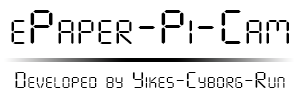
<style>
.page{position:relative;width:300px;height:100px;background:#ffffff}
.page>*{position:absolute;margin:0}
.t1{font:47.9px "SevenSegmentRegular";color:#000000;font-variant:small-caps;scale:1.2 1}
.t2{font:21.8px "SevenSegmentRegular";color:#000000;font-variant:small-caps;scale:1.2 1}
</style>
<div class="page">
<p class="t1" style="left:11px;top:10px;width:278px;height:34px">ePaper-Pi-Cam</p>
<p class="t2" style="left:15px;top:72px;width:270px;height:16px">Developed by Yikes-Cyborg-Run</p>
</div>
